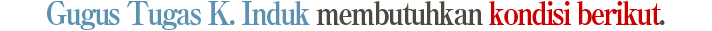
<style>
.page{position:relative;width:712px;height:31px;background:#ffffff}
.page>*{position:absolute;margin:0}
.t1{font:32px "RyuminPro-ExBold";letter-spacing:-0.08em;color:#5b92b2;scale:0.9 1}
.t2{font:32px "RyuminPro-ExBold";letter-spacing:-0.08em;color:#4c4842;scale:0.9 1}
.t3{font:32px "RyuminPro-ExBold";letter-spacing:-0.08em;color:#cb0000;scale:0.9 1}
</style>
<div class="page">
<p class="t1" style="left:47px;top:0px;width:618px;height:30px">Gugus Tugas K. Induk<span class="t2"> membutuhkan </span><span class="t3">kondisi berikut</span><span class="t2">.</span></p>
</div>
